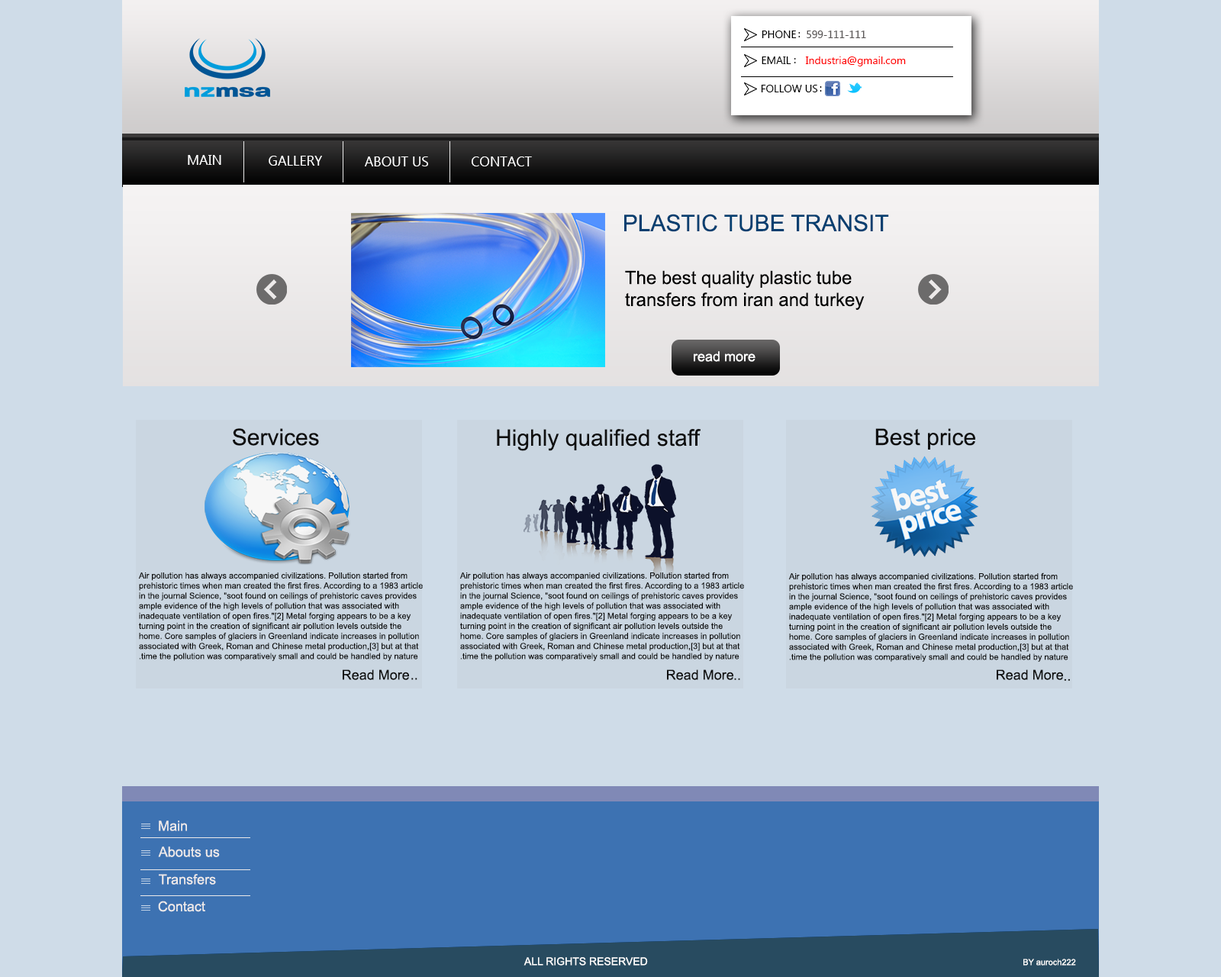
<style>
.page{position:relative;width:1221px;height:977px;background:#cfdce8}
.page>*{position:absolute;margin:0}
.t1{font:10.7px "Ebrima";color:#000000}
.t2{font:10.7px "Ebrima"}
.t3{font:10.7px "Ebrima";color:#595656}
.t4{font:10.7px "Ebrima";color:#ff0000}
.t5{font:13.7px "Ebrima";color:#ffffff}
.t6{font:22.9px "ArialMT";color:#053f70}
.t7{font:18.3px "ArialMT";color:#000000}
.t8{font:13.7px "ArialMT";color:#ffffff}
.t9{font:22.9px "ArialMT";color:#040404}
.t10{font:8.4px "ArialMT";color:#040404}
.t11{font:13.7px "ArialMT";color:#040404}
.t12{font:13.7px "ArialMT";color:#edeaea}
.t13{font:10.7px "ArialMT";color:#ffffff}
.t14{font:8.4px "ArialMT";color:#ffffff}
</style>
<div class="page">
<p class="t1" style="left:762px;top:31px;width:35px;height:7px">PHONE</p>
<p class="t2" style="left:798px;top:32px;width:2px;height:5px">:</p>
<p class="t3" style="left:807px;top:31px;width:59px;height:7px">599-111-111</p>
<p class="t1" style="left:762px;top:56px;width:29px;height:8px">EMAIL</p>
<p class="t2" style="left:794px;top:58px;width:2px;height:5px">:</p>
<p class="t4" style="left:806px;top:56px;width:100px;height:10px">Industria@gmail.com</p>
<p class="t1" style="left:761px;top:85px;width:57px;height:7px">FOLLOW US</p>
<p class="t1" style="left:820px;top:86px;width:2px;height:6px">:</p>
<p class="t5" style="left:188px;top:155px;width:33px;height:10px">MAIN</p>
<p class="t5" style="left:269px;top:156px;width:53px;height:10px">GALLERY</p>
<p class="t5" style="left:365px;top:156px;width:63px;height:10px">ABOUT US</p>
<p class="t5" style="left:472px;top:156px;width:60px;height:10px">CONTACT</p>
<p class="t6" style="left:624px;top:214px;width:265px;height:18px">PLASTIC TUBE TRANSIT</p>
<p class="t7" style="left:625px;top:270px;width:240px;height:40px;text-align:right">The best quality plastic tube<br>transfers from iran and turkey</p>
<p class="t8" style="left:694px;top:351px;width:61px;height:11px">read more</p>
<p class="t9" style="left:233px;top:428px;width:86px;height:18px">Services</p>
<p class="t9" style="left:497px;top:429px;width:204px;height:22px">Highly qualified staff</p>
<p class="t9" style="left:875px;top:428px;width:100px;height:21px">Best price</p>
<p class="t10" style="left:138px;top:572px;width:285px;height:89px;text-align:right">Air pollution has always accompanied civilizations. Pollution started from prehistoric times when man created the first fires. According to a 1983 article in the journal Science, "soot found on ceilings of prehistoric caves provides ample evidence of the high levels of pollution that was associated with inadequate ventilation of open fires."[2] Metal forging appears to be a key turning point in the creation of significant air pollution levels outside the home. Core samples of glaciers in Greenland indicate increases in pollution associated with Greek, Roman and Chinese metal production,[3] but at that time the pollution was comparatively small and could be handled by nature.</p>
<p class="t10" style="left:459px;top:572px;width:285px;height:89px;text-align:right">Air pollution has always accompanied civilizations. Pollution started from prehistoric times when man created the first fires. According to a 1983 article in the journal Science, "soot found on ceilings of prehistoric caves provides ample evidence of the high levels of pollution that was associated with inadequate ventilation of open fires."[2] Metal forging appears to be a key turning point in the creation of significant air pollution levels outside the home. Core samples of glaciers in Greenland indicate increases in pollution associated with Greek, Roman and Chinese metal production,[3] but at that time the pollution was comparatively small and could be handled by nature.</p>
<p class="t10" style="left:788px;top:572px;width:285px;height:90px;text-align:right">Air pollution has always accompanied civilizations. Pollution started from prehistoric times when man created the first fires. According to a 1983 article in the journal Science, "soot found on ceilings of prehistoric caves provides ample evidence of the high levels of pollution that was associated with inadequate ventilation of open fires."[2] Metal forging appears to be a key turning point in the creation of significant air pollution levels outside the home. Core samples of glaciers in Greenland indicate increases in pollution associated with Greek, Roman and Chinese metal production,[3] but at that time the pollution was comparatively small and could be handled by nature.</p>
<p class="t11" style="left:343px;top:669px;width:66px;height:11px">Read More</p>
<p class="t11" style="left:411px;top:678px;width:6px;height:2px">..</p>
<p class="t11" style="left:667px;top:669px;width:66px;height:11px">Read More</p>
<p class="t11" style="left:734px;top:678px;width:6px;height:2px">..</p>
<p class="t11" style="left:997px;top:669px;width:66px;height:11px">Read More</p>
<p class="t11" style="left:1064px;top:678px;width:6px;height:3px">..</p>
<p class="t12" style="left:159px;top:820px;width:28px;height:11px">Main</p>
<p class="t12" style="left:158px;top:846px;width:62px;height:11px">Abouts us</p>
<p class="t12" style="left:159px;top:874px;width:57px;height:10px">Transfers</p>
<p class="t12" style="left:158px;top:900px;width:47px;height:12px">Contact</p>
<p class="t13" style="left:523px;top:957px;width:125px;height:8px">ALL RIGHTS RESERVED</p>
<p class="t14" style="left:1023px;top:958px;width:53px;height:7px">BY auroch222</p>
</div>
